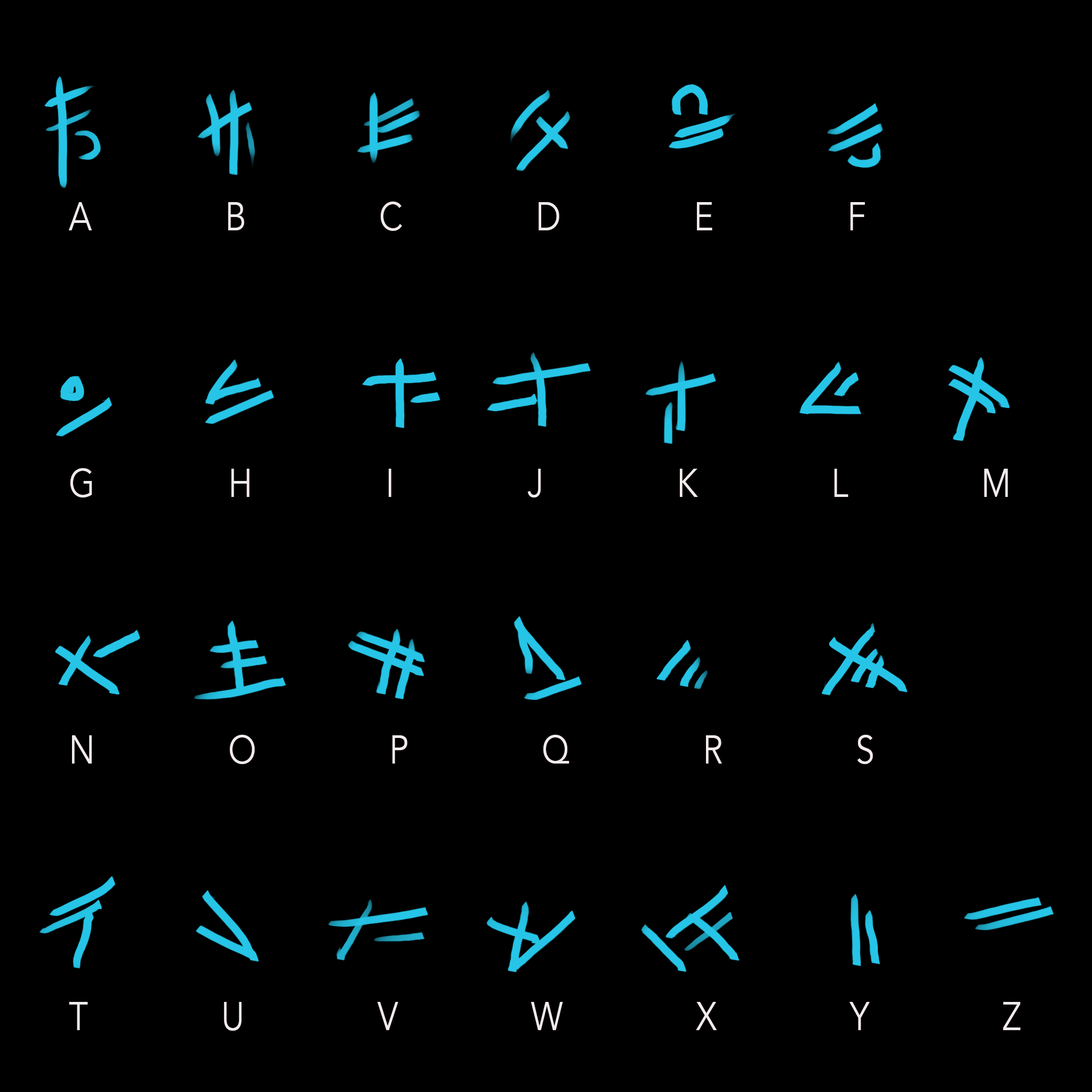
<style>
.page{position:relative;width:1092px;height:1092px;background:#000000}
.page>*{position:absolute;margin:0}
.t1{font:40px/266.6px "Avenir-Book";letter-spacing:4em;color:#f3ebeb;scale:0.83 1}
</style>
<div class="page">
<p class="t1" style="left:69px;top:202px;width:952px;height:829px">ABCDEF<br>GHIJKLM<br>NOPQRS<br>TUVWXYZ</p>
</div>
